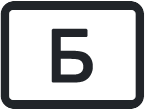
<style>
.page{position:relative;width:145px;height:110px;background:#ffffff}
.page>*{position:absolute;margin:0}
.t1{font:72px "ArialMT";color:#212429;font-weight:bold}
</style>
<div class="page">
<p class="t1" style="left:51px;top:28px;width:42px;height:55px">Б</p>
</div>
